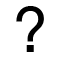
<style>
.page{position:relative;width:60px;height:60px;background:#ffffff}
.page>*{position:absolute;margin:0}
.t1{font:63px "HelveticaNeue";color:#000000}
</style>
<div class="page">
<p class="t1" style="left:16px;top:6px;width:28px;height:46px">?</p>
</div>
